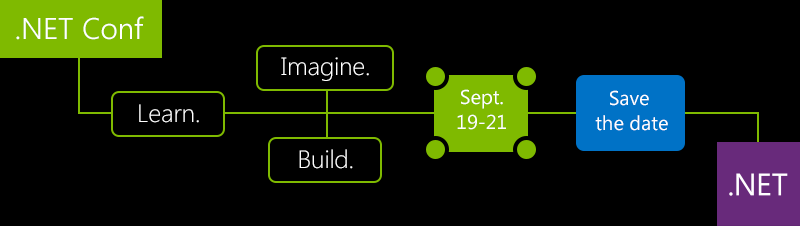
<style>
.page{position:relative;width:800px;height:226px;background:#000000}
.page>*{position:absolute;margin:0}
.t1{font:30px "SegoeUI-Semilight";color:#ffffff}
.t2{font:25px "SegoeUI-Light";color:#ffffff}
.t3{font:20px/25px "SegoeUI";color:#ffffff}
</style>
<div class="page">
<p class="t1" style="left:16px;top:16px;width:128px;height:24px">.NET Conf</p>
<p class="t2" style="left:281px;top:57px;width:88px;height:24px">Imagine.</p>
<p class="t3" style="left:457px;top:89px;width:49px;height:41px;text-align:center">Sept.<br>19-21</p>
<p class="t3" style="left:595px;top:90px;width:73px;height:41px;text-align:center">Save <br>the date</p>
<p class="t2" style="left:139px;top:104px;width:60px;height:19px">Learn.</p>
<p class="t2" style="left:299px;top:149px;width:54px;height:20px">Build.</p>
</div>
